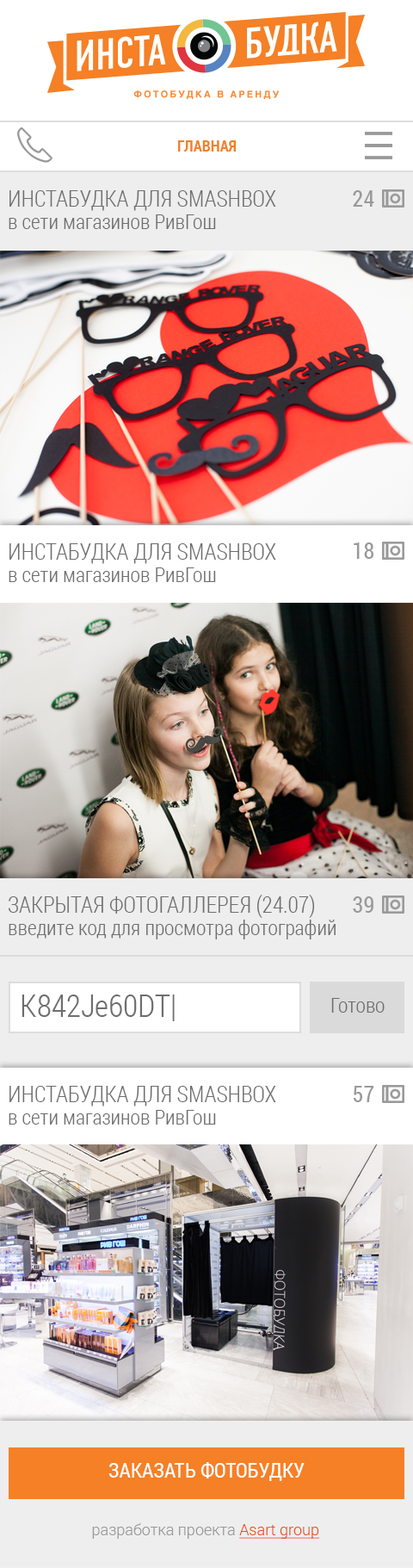
<style>
.page{position:relative;width:413px;height:1568px}
.page>*{position:absolute;margin:0}
.t1{font:15.5px "RobotoCondensed-Bold";color:#f58026}
.t2{font:22.4px "RobotoCondensed-Light";color:#6e6e6e;text-transform:uppercase}
.t3{font:22.4px "RobotoCondensed-Regular";color:#999999;text-transform:uppercase}
.t4{font:20.7px "RobotoCondensed-Light";color:#6e6e6e}
.t5{font:31px "RobotoCondensed-Light";color:#6e6e6e}
.t6{font:31px "RobotoCondensed-Light";color:#6e6e6e;text-transform:uppercase}
.t7{font:20.7px "RobotoCondensed-Regular";color:#ffffff;text-transform:uppercase}
.t8{font:15.5px "Roboto-Light";color:#999999}
.t9{font:15.5px "Roboto-Light";color:#e94e1b;text-decoration:underline}
</style>
<div class="page">
<p class="t1" style="left:178px;top:140px;width:59px;height:12px">ГЛАВНАЯ</p>
<p class="t2" style="left:9px;top:190px;width:267px;height:21px">Инстабудка для smashbox</p>
<p class="t3" style="left:353px;top:190px;width:22px;height:17px">24</p>
<p class="t4" style="left:9px;top:214px;width:207px;height:15px">в сети магазинов РивГош</p>
<p class="t2" style="left:9px;top:543px;width:267px;height:21px">Инстабудка для smashbox</p>
<p class="t3" style="left:354px;top:542px;width:20px;height:17px">18</p>
<p class="t4" style="left:9px;top:567px;width:207px;height:15px">в сети магазинов РивГош</p>
<p class="t2" style="left:9px;top:895px;width:306px;height:23px">закрытая фотогаллерея (24.07)</p>
<p class="t3" style="left:353px;top:896px;width:21px;height:17px">39</p>
<p class="t4" style="left:9px;top:920px;width:327px;height:19px">введите код для просмотра фотографий</p>
<p class="t5" style="left:22px;top:995px;width:153px;height:26px"><span class="t6">k842J</span>e60DT|</p>
<p class="t4" style="left:332px;top:998px;width:53px;height:15px">Готово</p>
<p class="t2" style="left:9px;top:1086px;width:267px;height:20px">Инстабудка для smashbox</p>
<p class="t3" style="left:354px;top:1086px;width:21px;height:16px">57</p>
<p class="t4" style="left:9px;top:1110px;width:207px;height:15px">в сети магазинов РивГош</p>
<p class="t7" style="left:108px;top:1462px;width:197px;height:19px">заказать фотобудку</p>
<p class="t8" style="left:92px;top:1523px;width:228px;height:16px">разработка проекта <span class="t9">Asart group</span></p>
</div>
